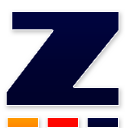
<style>
.page{position:relative;width:128px;height:128px;background:#ffffff}
.page>*{position:absolute;margin:0}
.t1{font:120px "Impact";color:#000333;scale:2.5 1}
.t2{font:72px "Impact";color:#ff9000;scale:3 1}
.t3{font:72px "Impact";color:#fe0600;scale:3 1}
.t4{font:72px "Impact";color:#000333;scale:3 1}
</style>
<div class="page">
<p class="t1" style="left:5px;top:11px;width:115px;height:95px">Z</p>
<p class="t2" style="left:6px;top:117px;width:113px;height:11px">.<span class="t3">.</span><span class="t4">.</span></p>
</div>
